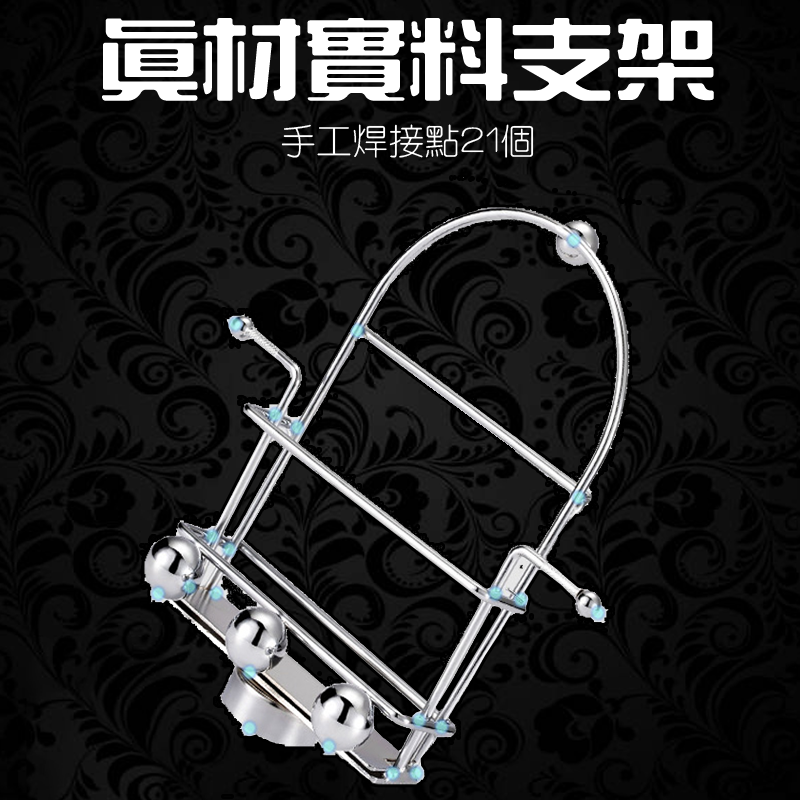
<style>
.page{position:relative;width:800px;height:800px}
.page>*{position:absolute;margin:0}
.t1{font:87.7px "HanWangZonYi";color:#ffffff;scale:1.18 1}
.t2{font:36px "HanWangYenLight";color:#ffffff}
</style>
<div class="page">
<p class="t1" style="left:102px;top:18px;width:612px;height:83px">真材實料支架</p>
<p class="t2" style="left:281px;top:124px;width:253px;height:34px">手工焊接點21個</p>
</div>
